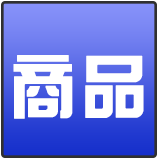
<style>
.page{position:relative;width:160px;height:160px;background:#ffffff}
.page>*{position:absolute;margin:0}
.t1{font:70.6px "DFZongYi-XB";letter-spacing:0.08em;color:#ffffff;scale:0.93 1}
</style>
<div class="page">
<p class="t1" style="left:13px;top:55px;width:131px;height:64px">商品</p>
</div>
